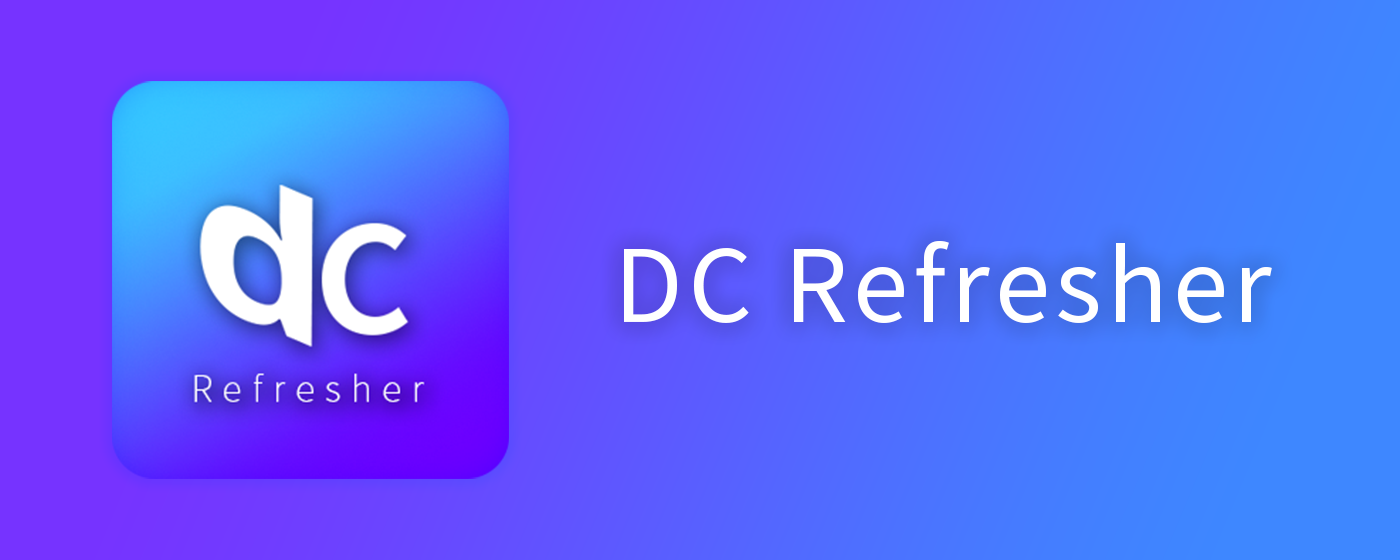
<style>
.page{position:relative;width:1400px;height:560px}
.page>*{position:absolute;margin:0}
.t1{font:100.2px "NotoSansCJKkr-Regular";letter-spacing:0.05em;color:#ffffff}
</style>
<div class="page">
<p class="t1" style="left:624px;top:241px;width:648px;height:82px">DC Refresher</p>
</div>
